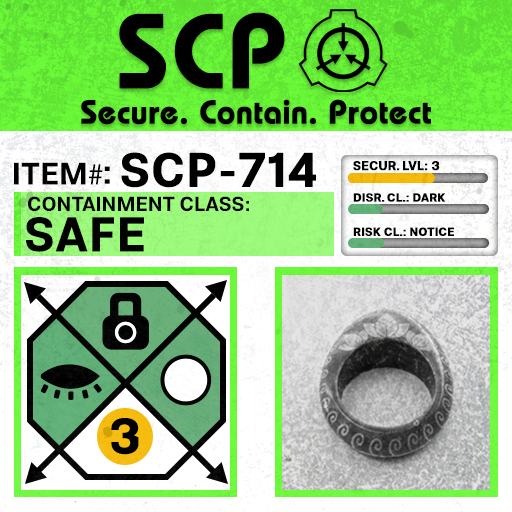
<style>
.page{position:relative;width:512px;height:512px}
.page>*{position:absolute;margin:0}
.t1{font:105.8px "BauhausLT-Demi";color:#000000;font-weight:bold}
.t2{font:33px "BauhausLT-Demi";color:#000000;font-weight:bold}
.t3{font:47.6px "Molde-Semibold";color:#000000;font-weight:bold}
.t4{font:12.5px "Molde-Semibold";color:#000000;font-weight:bold}
.t5{font:31.1px "Molde-Semibold";color:#000000}
.t6{font:31.1px "MyriadPro-Regular";color:#000000}
.t7{font:34.5px "Molde-Semibold";color:#000000}
.t8{font:20.3px "Molde-Semibold";color:#000000}
.t9{font:11.7px "Molde-Semibold";color:#000000;font-weight:bold}
.t10{font:47.8px "Molde-Semibold";color:#000000;font-weight:bold}
</style>
<div class="page">
<p class="t1" style="left:119px;top:12px;width:166px;height:77px">SCP</p>
<p class="t2" style="left:81px;top:99px;width:350px;height:26px">Secure. Contain. Protect</p>
<p class="t3" style="left:121px;top:152px;width:195px;height:36px">SCP-714</p>
<p class="t4" style="left:353px;top:161px;width:87px;height:10px">SECUR. LVL: 3</p>
<p class="t5" style="left:14px;top:162px;width:89px;height:23px">ITEM<span class="t6">#</span></p>
<p class="t7" style="left:104px;top:166px;width:6px;height:18px">:</p>
<p class="t8" style="left:28px;top:196px;width:221px;height:16px">CONTAINMENT CLASS:</p>
<p class="t9" style="left:353px;top:193px;width:93px;height:9px">DISR. CL.: DARK</p>
<p class="t10" style="left:26px;top:217px;width:118px;height:35px">SAFE</p>
<p class="t9" style="left:353px;top:227px;width:101px;height:9px">RISK CL.: NOTICE</p>
</div>
